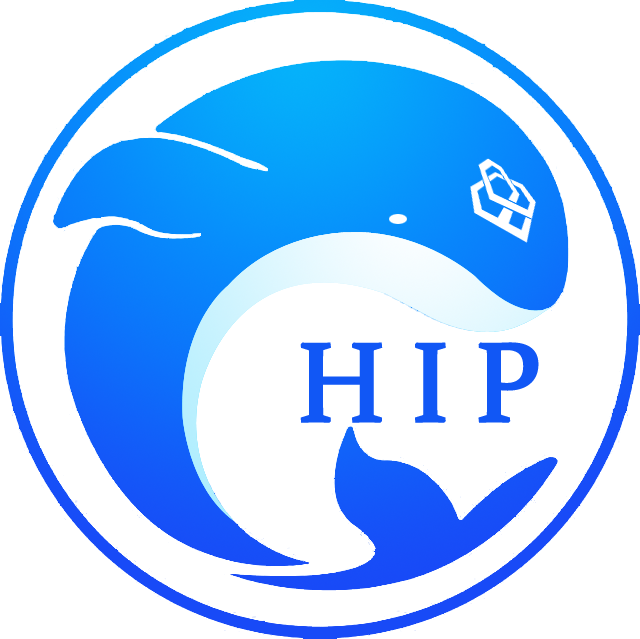
<style>
.page{position:relative;width:640px;height:639px;background:#ffffff}
.page>*{position:absolute;margin:0}
.t1{font:112.2px "Constantia";letter-spacing:0.2em;color:#1157f5;font-weight:bold}
</style>
<div class="page">
<p class="t1" style="left:300px;top:342px;width:239px;height:81px">HIP</p>
</div>
